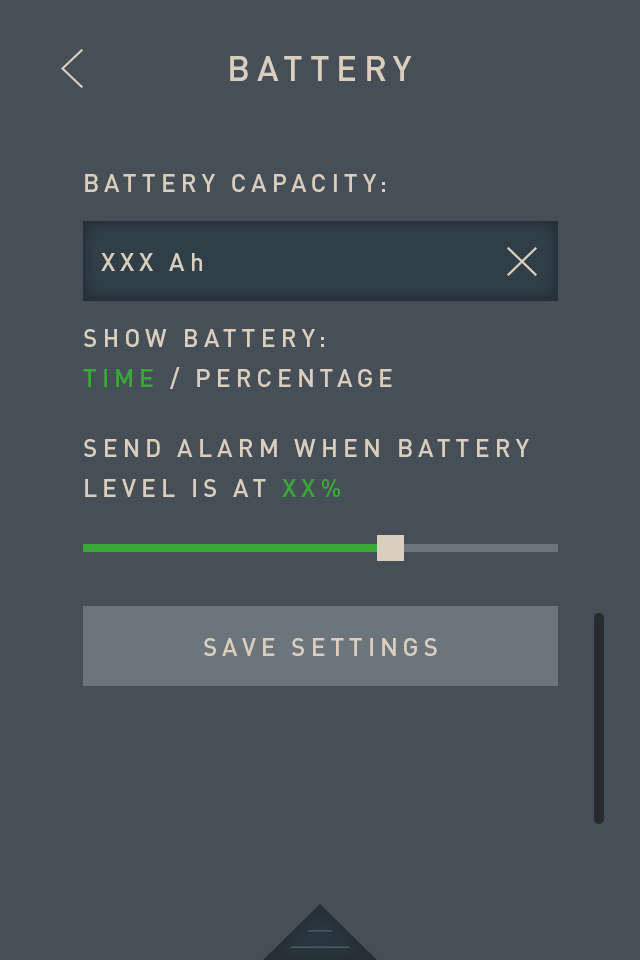
<style>
.page{position:relative;width:640px;height:960px;background:#464f58}
.page>*{position:absolute;margin:0}
.t1{font:35px "DINPro-Medium";letter-spacing:0.2em;color:#dacebe}
.t2{font:25px/70px "DINPro-Medium";letter-spacing:0.2em;color:#dacebe}
.t3{font:25px/85px "DINPro-Medium";letter-spacing:0.2em;color:#dacebe}
.t4{font:25px/40px "DINPro-Medium";letter-spacing:0.2em;color:#39a935}
.t5{font:25px/40px "DINPro-Medium";letter-spacing:0.2em;color:#dacebe}
.t6{font:25.1px/105.5px "DINPro-Medium";letter-spacing:0.2em;color:#dacebe}
.t7{font:25.2px/106.3px "DINPro-Medium";letter-spacing:0.2em;color:#dacebe}
.t8{font:25.3px/106.3px "DINPro-Medium";letter-spacing:0.2em;color:#dacebe}
</style>
<div class="page">
<p class="t1" style="left:230px;top:56px;width:182px;height:25px">BATTERY</p>
<p class="t2" style="left:83px;top:174px;width:446px;height:323px"><span class="t3">BATTERY CAPACITY:<br><br></span>SHOW BATTERY:<br><span class="t4">TIME</span><span class="t5"> / PERCENTAGE<br></span>SEND ALARM WHEN BATTERY <span class="t5">LEVEL IS AT </span><span class="t4">XX%</span></p>
<p class="t6" style="left:101px;top:253px;width:101px;height:18px">XXX Ah<br>ISCH</p>
<p class="t7" style="left:204px;top:638px;width:233px;height:18px;text-align:center">SAVE SETTINGS<br><span class="t8">ISCH</span></p>
</div>
